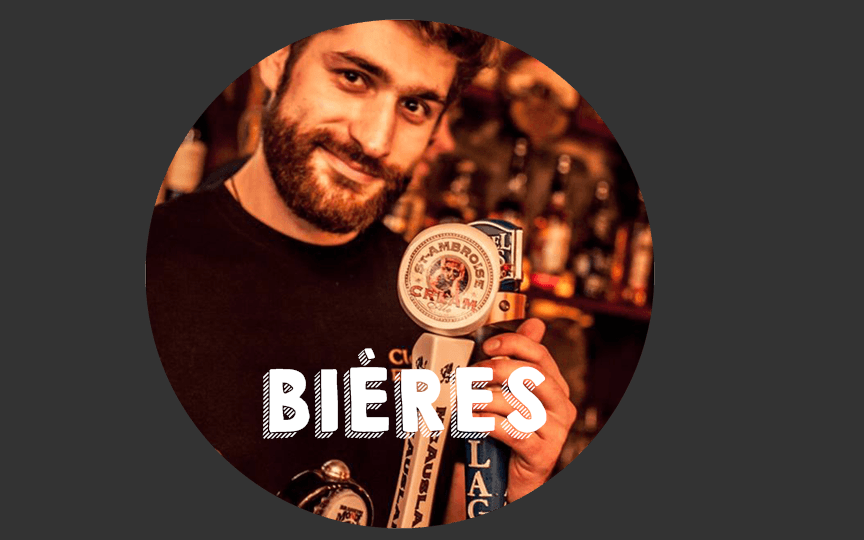
<style>
.page{position:relative;width:864px;height:540px;background:#333333}
.page>*{position:absolute;margin:0}
.t1{font:77px "KGHAPPY";color:#ffffff;text-transform:uppercase}
</style>
<div class="page">
<p class="t1" style="left:262px;top:348px;width:285px;height:92px">Bières</p>
</div>
